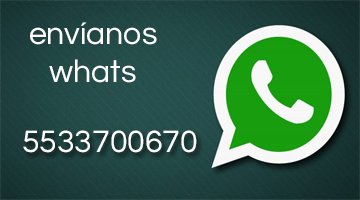
<style>
.page{position:relative;width:360px;height:200px}
.page>*{position:absolute;margin:0}
.t1{font:32px "Questrial-Regular";color:#ffffff}
</style>
<div class="page">
<p class="t1" style="left:30px;top:22px;width:127px;height:61px;text-align:center">envíanos whats</p>
<p class="t1" style="left:23px;top:130px;width:174px;height:23px">5533700670</p>
</div>
